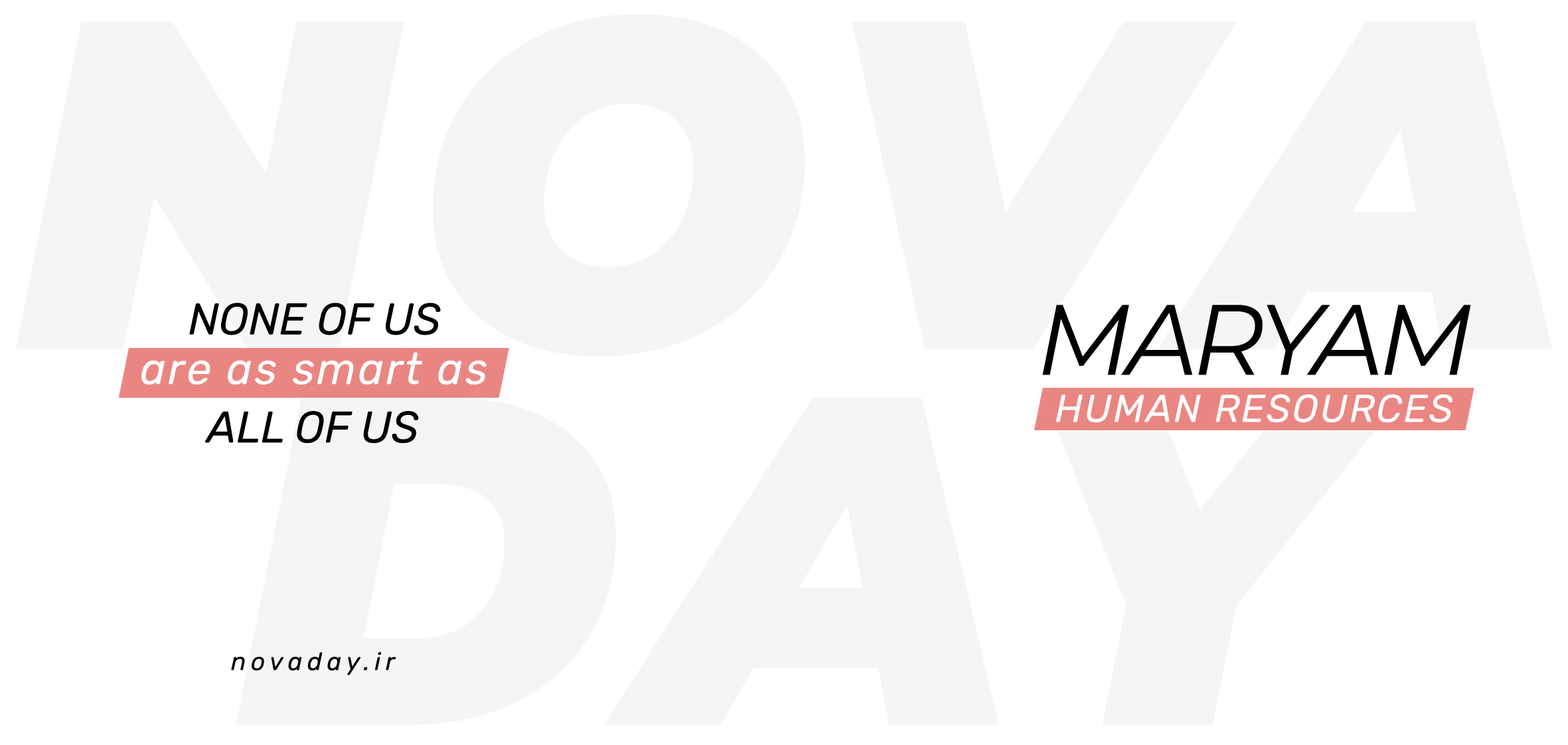
<style>
.page{position:relative;width:1568px;height:745px;background:#ffffff}
.page>*{position:absolute;margin:0}
.t1{font:44.3px "Rubik-Italic";color:#000000}
.t2{font:99.6px "Montserrat-Italic";letter-spacing:-0.05em;color:#000000}
.t3{font:44.3px "Rubik-Italic";letter-spacing:0.05em;color:#ffffff}
.t4{font:38.7px "Rubik-Italic";letter-spacing:0.05em;color:#ffffff}
.t5{font:24.9px "Rubik-Italic";letter-spacing:0.2em;color:#000000}
</style>
<div class="page">
<p class="t1" style="left:189px;top:303px;width:252px;height:32px">NONE OF US</p>
<p class="t2" style="left:1042px;top:305px;width:429px;height:70px">MARYAM</p>
<p class="t3" style="left:141px;top:353px;width:346px;height:32px">are as smart as</p>
<p class="t4" style="left:1056px;top:394px;width:396px;height:29px">HUMAN RESOURCES</p>
<p class="t1" style="left:205px;top:411px;width:214px;height:32px">ALL OF US</p>
<p class="t5" style="left:231px;top:652px;width:165px;height:23px">novaday.ir</p>
</div>
